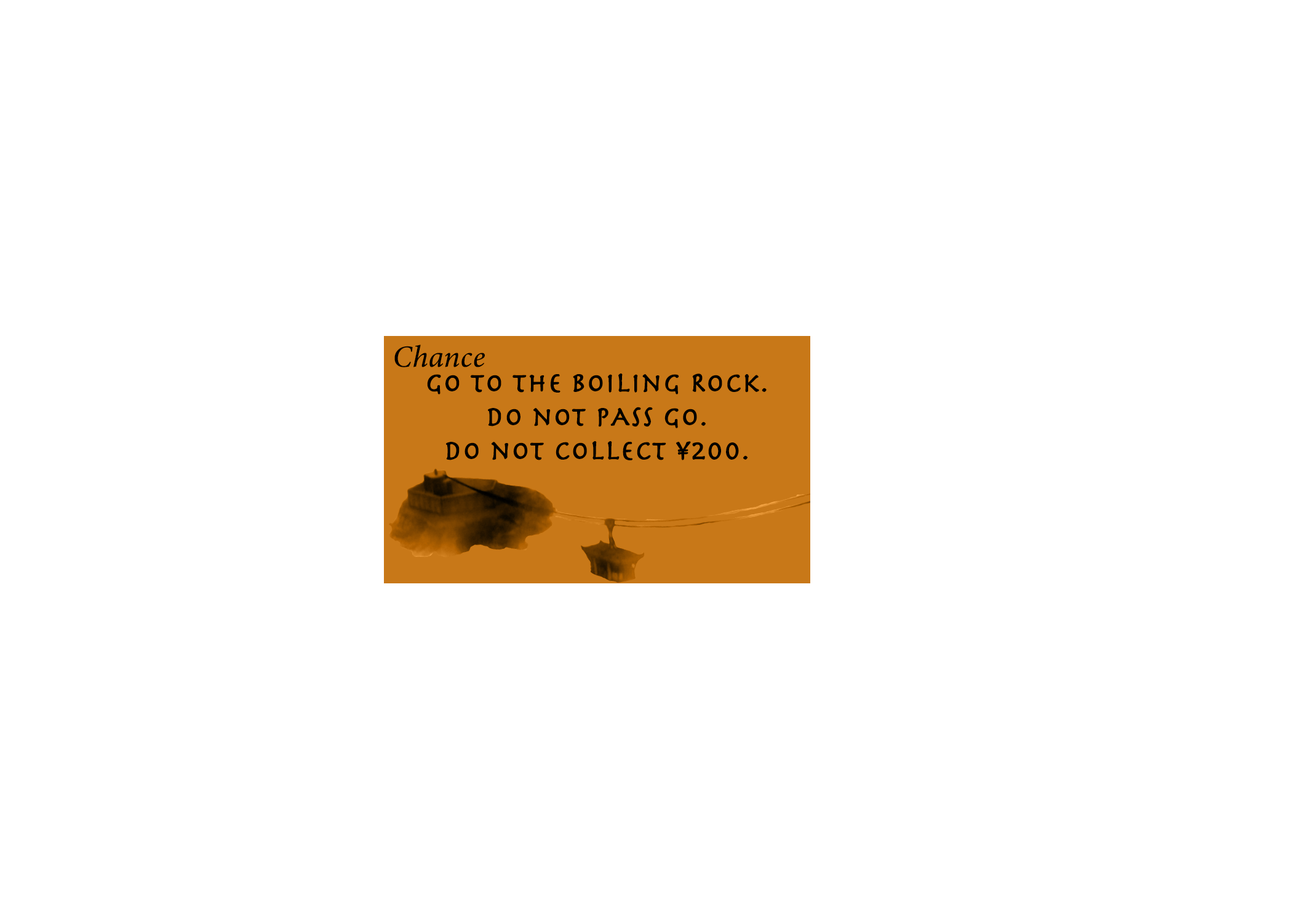
<style>
.page{position:relative;width:1292px;height:923px;background:#ffffff}
.page>*{position:absolute;margin:0}
.t1{font:30.8px "MinionConceptItalic-MediumItalic";color:#000000;font-weight:bold}
.t2{font:28.2px "Herculanum";color:#000000;font-weight:bold}
</style>
<div class="page">
<p class="t1" style="left:394px;top:345px;width:91px;height:22px">Chance</p>
<p class="t2" style="left:427px;top:373px;width:340px;height:87px;text-align:center">go to the boiling Rock.<br>do not pAss go.<br>do not collect ¥200.</p>
</div>
